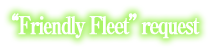
<style>
.page{position:relative;width:208px;height:49px;background:#ffffff}
.page>*{position:absolute;margin:0}
.t1{font:24px "RyuminPro-ExBold";letter-spacing:-0.1em;color:#ffffff;font-weight:bold;scale:0.8 1}
</style>
<div class="page">
<p class="t1" style="left:11px;top:13px;width:189px;height:26px">“Friendly Fleet” request</p>
</div>
